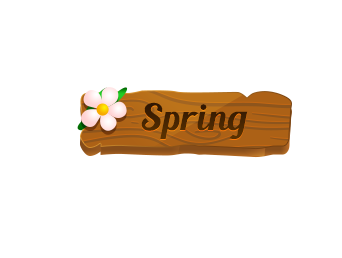
<style>
.page{position:relative;width:342px;height:258px;background:#ffffff}
.page>*{position:absolute;margin:0}
.t1{font:36px "BlendaScript";letter-spacing:0.025em;color:#480e03}
</style>
<div class="page">
<p class="t1" style="left:141px;top:102px;width:107px;height:37px">Spring</p>
</div>
